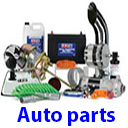
<style>
.page{position:relative;width:128px;height:128px;background:#ffffff}
.page>*{position:absolute;margin:0}
.t1{font:21px "MyriadPro-Bold";color:#0000ff}
</style>
<div class="page">
<p class="t1" style="left:17px;top:107px;width:98px;height:19px">Auto parts</p>
</div>
